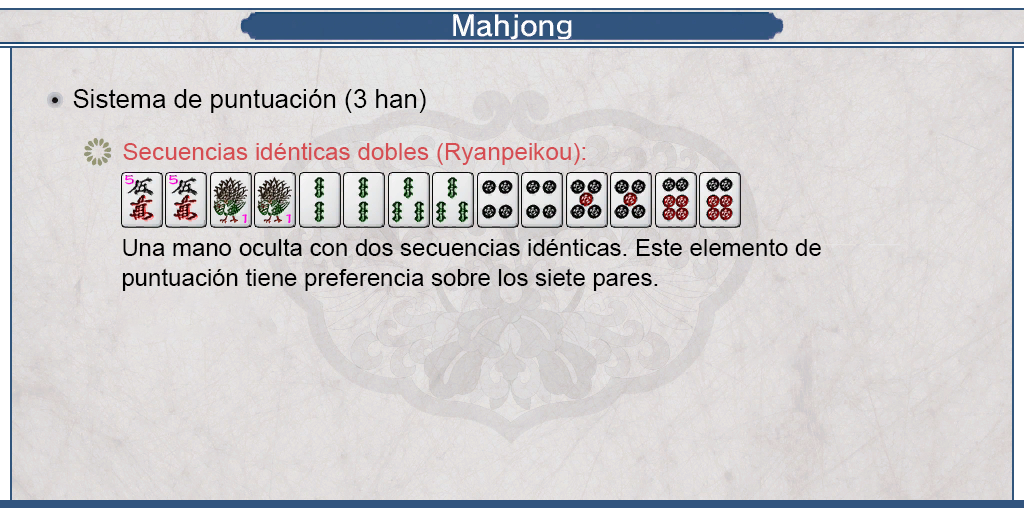
<style>
.page{position:relative;width:1024px;height:512px}
.page>*{position:absolute;margin:0}
.t1{font:26px "ArialMT";color:#000000}
.t2{font:24px "ArialMT";color:#d64d52}
.t3{font:24px/30px "ArialMT";color:#000000}
</style>
<div class="page">
<p class="t1" style="left:73px;top:89px;width:353px;height:24px">Sistema de puntuación (3 han)</p>
<p class="t2" style="left:123px;top:142px;width:463px;height:23px">Secuencias idénticas dobles (Ryanpeikou):</p>
<p class="t3" style="left:122px;top:238px;width:699px;height:53px;text-align:justify">Una mano oculta con dos secuencias idénticas. Este elemento de <br>puntuación tiene preferencia sobre los siete pares.</p>
</div>
